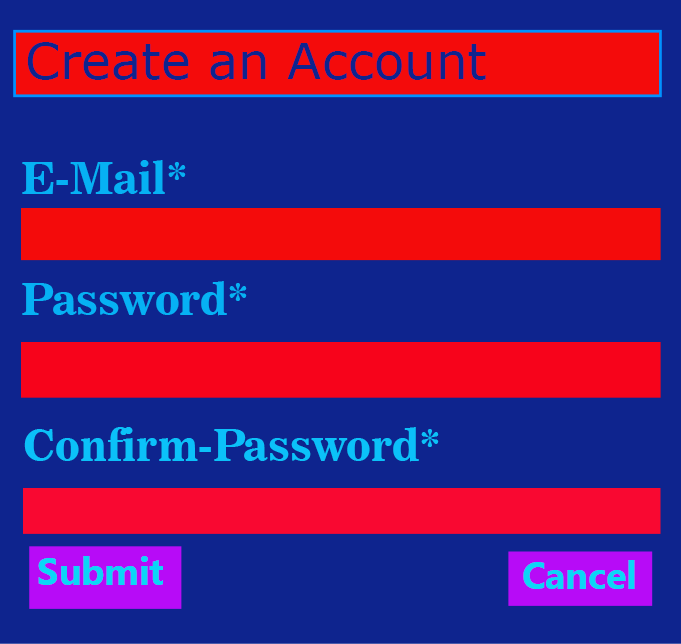
<style>
.page{position:relative;width:681px;height:644px;background:#0e248e}
.page>*{position:absolute;margin:0}
.t1{font:50px "MSReferenceSansSerif";color:#0e248e}
.t2{font:43.8px "News706BT-BoldC";color:#06b1f4}
.t3{font:43.8px "News706BT-BoldC";color:#0bc1f9}
.t4{font:37.5px "MyanmarText-Bold";color:#0bd6f7}
</style>
<div class="page">
<p class="t1" style="left:27px;top:42px;width:459px;height:38px">Create an Account</p>
<p class="t2" style="left:22px;top:160px;width:164px;height:34px">E-Mail*</p>
<p class="t2" style="left:22px;top:281px;width:225px;height:35px">Password*</p>
<p class="t3" style="left:24px;top:427px;width:415px;height:35px">Confirm-Password*</p>
<p class="t4" style="left:38px;top:556px;width:125px;height:29px">Submit</p>
<p class="t4" style="left:523px;top:560px;width:112px;height:29px">Cancel</p>
</div>
